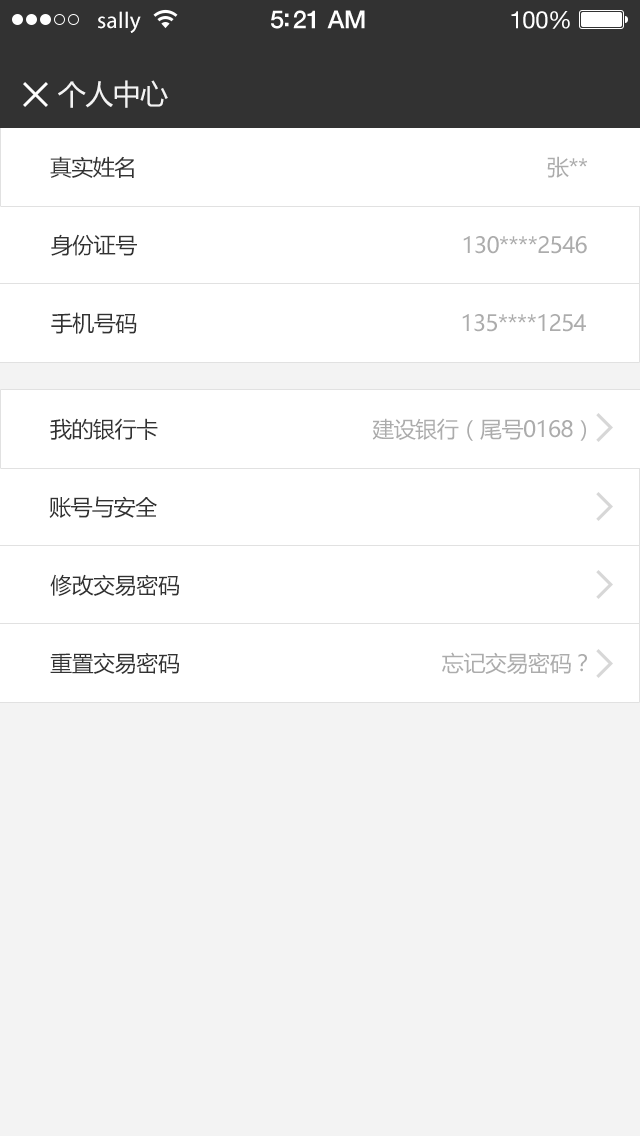
<style>
.page{position:relative;width:640px;height:1136px;background:#ffffff}
.page>*{position:absolute;margin:0}
.t1{font:23px "MyriadPro-Regular";letter-spacing:0.02em;color:#ffffff}
.t2{font:25px "HelveticaNeue-Medium";letter-spacing:-0.02em;color:#ffffff}
.t3{font:24px "HelveticaNeue";letter-spacing:-0.02em;color:#ffffff}
.t4{font:28px "MicrosoftYaHei";letter-spacing:-0.02em;color:#f3f3f3}
.t5{font:22px "MicrosoftYaHei";letter-spacing:-0.02em;color:#323232}
.t6{font:22px "MicrosoftYaHei";letter-spacing:-0.02em;color:#acacac}
</style>
<div class="page">
<p class="t1" style="left:98px;top:11px;width:43px;height:22px">sally</p>
<p class="t2" style="left:271px;top:10px;width:94px;height:19px">5:21 AM</p>
<p class="t3" style="left:511px;top:11px;width:59px;height:18px">100%</p>
<p class="t4" style="left:58px;top:80px;width:110px;height:28px">个人中心</p>
<p class="t5" style="left:50px;top:156px;width:84px;height:22px">真实姓名</p>
<p class="t6" style="left:547px;top:156px;width:41px;height:22px">张**</p>
<p class="t5" style="left:51px;top:234px;width:86px;height:22px">身份证号</p>
<p class="t6" style="left:463px;top:236px;width:124px;height:18px">130****2546</p>
<p class="t5" style="left:51px;top:312px;width:86px;height:22px">手机号码</p>
<p class="t6" style="left:462px;top:314px;width:124px;height:18px">135****1254</p>
<p class="t5" style="left:50px;top:418px;width:108px;height:22px">我的银行卡</p>
<p class="t6" style="left:372px;top:418px;width:214px;height:23px">建设银行（尾号0168）</p>
<p class="t5" style="left:49px;top:496px;width:108px;height:22px">账号与安全</p>
<p class="t5" style="left:50px;top:574px;width:129px;height:22px">修改交易密码</p>
<p class="t5" style="left:50px;top:652px;width:129px;height:22px">重置交易密码</p>
<p class="t6" style="left:442px;top:652px;width:145px;height:22px">忘记交易密码？</p>
</div>
